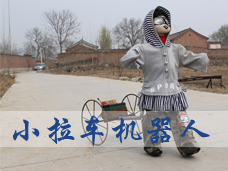
<style>
.page{position:relative;width:228px;height:171px}
.page>*{position:absolute;margin:0}
.t1{font:33.6px "STXingkai";color:#1d4689}
</style>
<div class="page">
<p class="t1" style="left:13px;top:115px;width:197px;height:32px">小拉车机器人</p>
</div>
